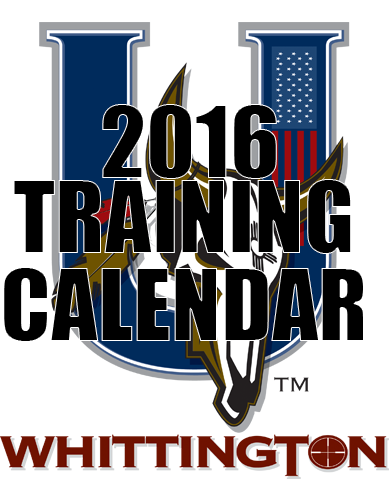
<style>
.page{position:relative;width:389px;height:500px;background:#ffffff}
.page>*{position:absolute;margin:0}
.t1{font:92px "Impact";color:#000000;text-transform:uppercase}
.t2{font:92px/88px "Impact";color:#000000;text-transform:uppercase}
</style>
<div class="page">
<p class="t1" style="left:102px;top:104px;width:175px;height:75px">2016</p>
<p class="t2" style="left:3px;top:179px;width:361px;height:163px;text-align:center">training<br>Calendar</p>
</div>
